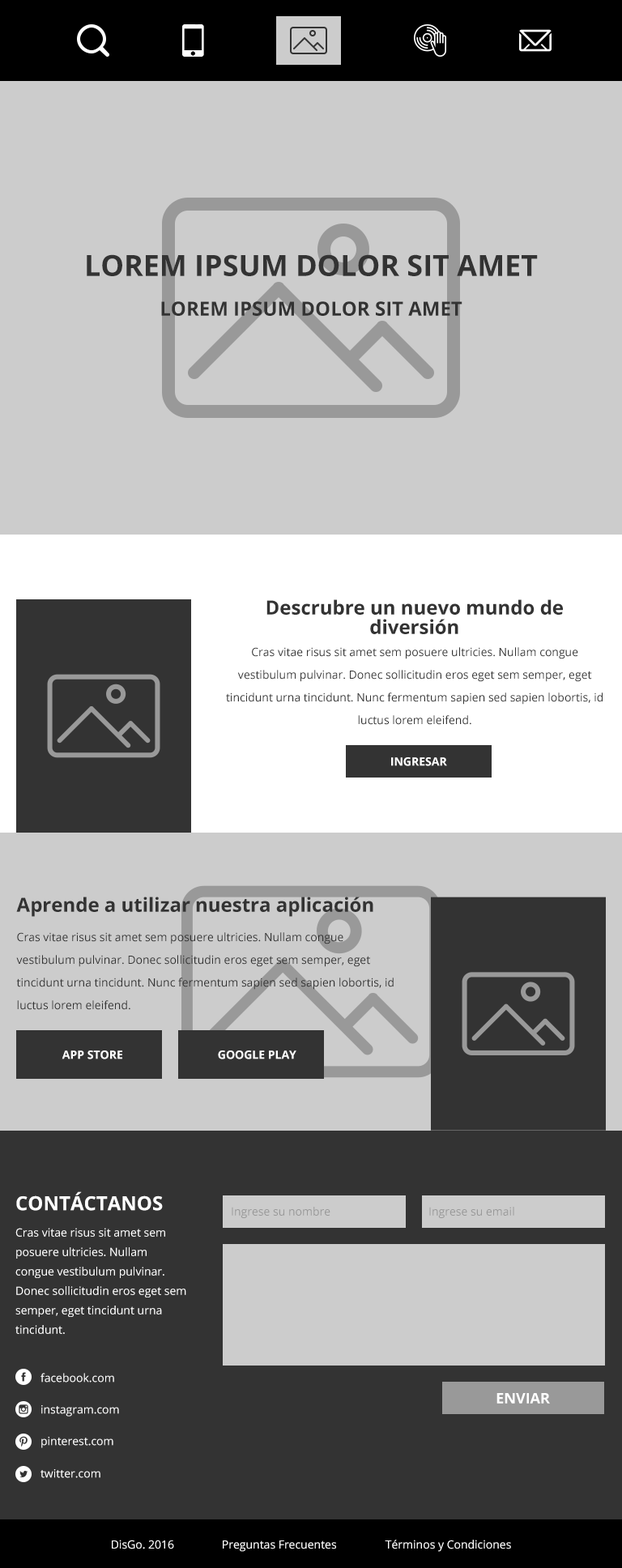
<style>
.page{position:relative;width:622px;height:1568px;background:#cccccc}
.page>*{position:absolute;margin:0}
.t1{font:29.2px "OpenSans-Bold";color:#333333;text-transform:uppercase}
.t2{font:19.4px "OpenSans-Bold";color:#333333;text-transform:uppercase}
.t3{font:19.4px/19.4px "OpenSans-Bold";color:#333333}
.t4{font:11.3px/22.7px "OpenSans";color:#333333}
.t5{font:11.3px "OpenSans-Bold";color:#ffffff;text-transform:uppercase}
.t6{font:19.4px "OpenSans-Bold";color:#333333}
.t7{font:19.4px "OpenSans-Bold";color:#ffffff}
.t8{font:11.3px "OpenSans";color:#999999}
.t9{font:11.3px/19.4px "OpenSans";color:#ffffff}
.t10{font:11.3px "OpenSans";color:#ffffff}
.t11{font:14.6px "OpenSans-Bold";color:#ffffff;text-transform:uppercase}
</style>
<div class="page">
<p class="t1" style="left:87px;top:254px;width:451px;height:22px">Lorem ipsum dolor sit amet</p>
<p class="t2" style="left:161px;top:301px;width:301px;height:15px">Lorem ipsum dolor sit amet</p>
<p class="t3" style="left:266px;top:599px;width:297px;height:35px;text-align:center">Descrubre un nuevo mundo de diversión</p>
<p class="t4" style="left:226px;top:647px;width:377px;height:78px;text-align:center">Cras vitae risus sit amet sem posuere ultricies. Nullam congue vestibulum pulvinar. Donec sollicitudin eros eget sem semper, eget tincidunt urna tincidunt. Nunc fermentum sapien sed sapien lobortis, id luctus lorem eleifend.</p>
<p class="t5" style="left:391px;top:757px;width:56px;height:9px">Ingresar</p>
<p class="t6" style="left:16px;top:897px;width:357px;height:20px">Aprende a utilizar nuestra aplicación</p>
<p class="t4" style="left:16px;top:932px;width:378px;height:78px">Cras vitae risus sit amet sem posuere ultricies. Nullam congue vestibulum pulvinar. Donec sollicitudin eros eget sem semper, eget tincidunt urna tincidunt. Nunc fermentum sapien sed sapien lobortis, id luctus lorem eleifend.</p>
<p class="t5" style="left:62px;top:1050px;width:60px;height:9px">App Store</p>
<p class="t5" style="left:218px;top:1050px;width:78px;height:9px">Google Play</p>
<p class="t7" style="left:16px;top:1191px;width:147px;height:20px">CONTÁCTANOS</p>
<p class="t8" style="left:232px;top:1207px;width:98px;height:11px">Ingrese su nombre</p>
<p class="t8" style="left:429px;top:1207px;width:85px;height:11px">Ingrese su email</p>
<p class="t9" style="left:15px;top:1228px;width:171px;height:106px">Cras vitae risus sit amet sem posuere ultricies. Nullam congue vestibulum pulvinar. Donec sollicitudin eros eget sem semper, eget tincidunt urna tincidunt.</p>
<p class="t10" style="left:40px;top:1373px;width:74px;height:10px">facebook.com</p>
<p class="t11" style="left:496px;top:1393px;width:54px;height:11px">Enviar</p>
<p class="t10" style="left:41px;top:1405px;width:78px;height:12px">instagram.com</p>
<p class="t10" style="left:41px;top:1437px;width:72px;height:11px">pinterest.com</p>
<p class="t10" style="left:40px;top:1469px;width:60px;height:9px">twitter.com</p>
<p class="t10" style="left:112px;top:1540px;width:62px;height:9px">DisGo. 2016</p>
<p class="t10" style="left:223px;top:1540px;width:113px;height:12px">Preguntas Frecuentes</p>
<p class="t10" style="left:385px;top:1540px;width:126px;height:12px">Términos y Condiciones</p>
</div>
